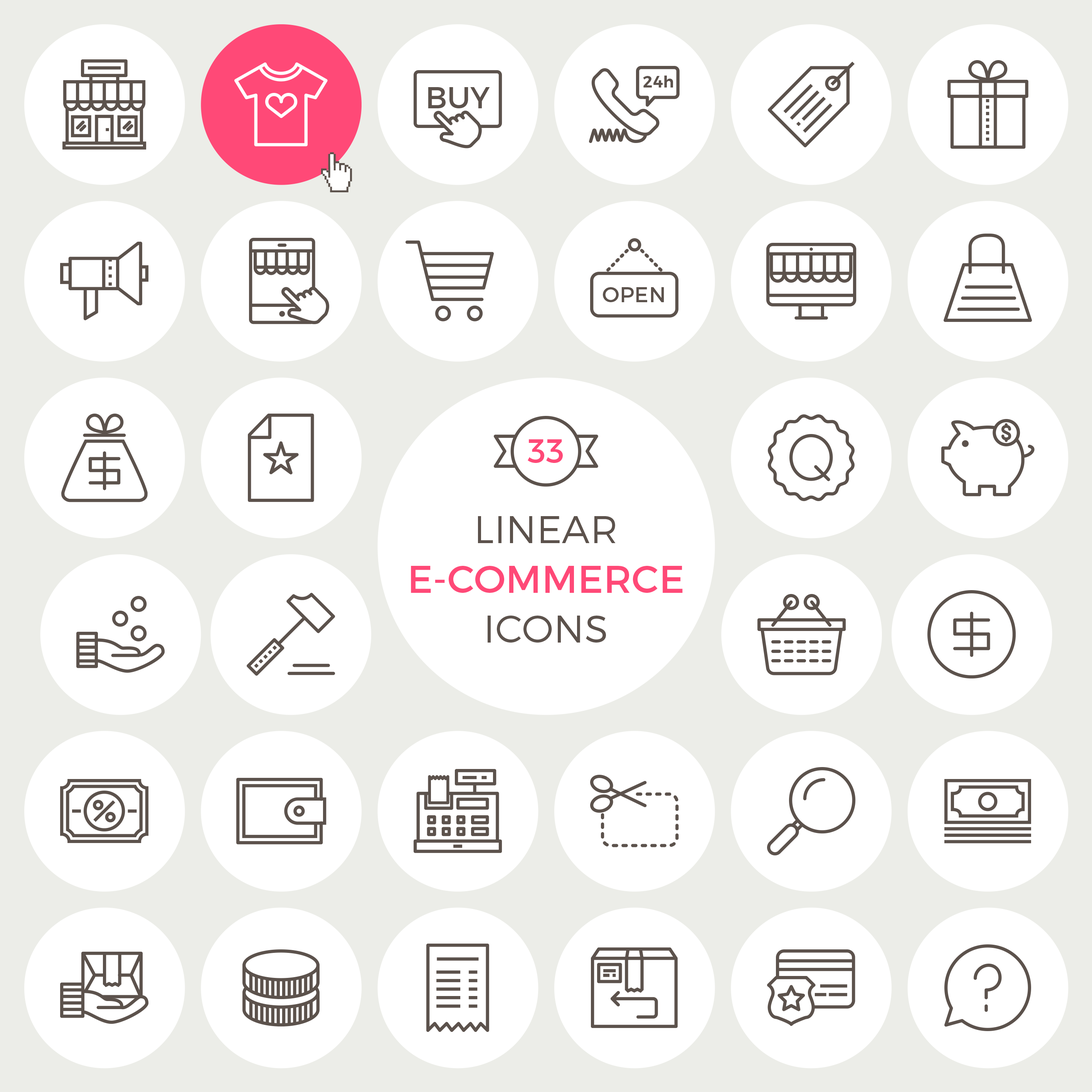
<style>
.page{position:relative;width:1092px;height:1092px;background:#ffffff}
.page>*{position:absolute;margin:0}
.t1{font:33.7px "Montserrat-Regular";letter-spacing:0.01em;color:#ff4977}
.t2{font:38.5px/49.8px "Montserrat-Regular";letter-spacing:0.01em;color:#ff4977}
.t3{font:38.5px/49.8px "Montserrat-Light";letter-spacing:0.01em;color:#5c524c}
</style>
<div class="page">
<p class="t1" style="left:528px;top:439px;width:35px;height:24px">33</p>
<p class="t2" style="left:411px;top:516px;width:272px;height:127px;text-align:center"><span class="t3">LINEAR<br></span>E-COMMERCE<br><span class="t3">ICONS</span></p>
</div>
